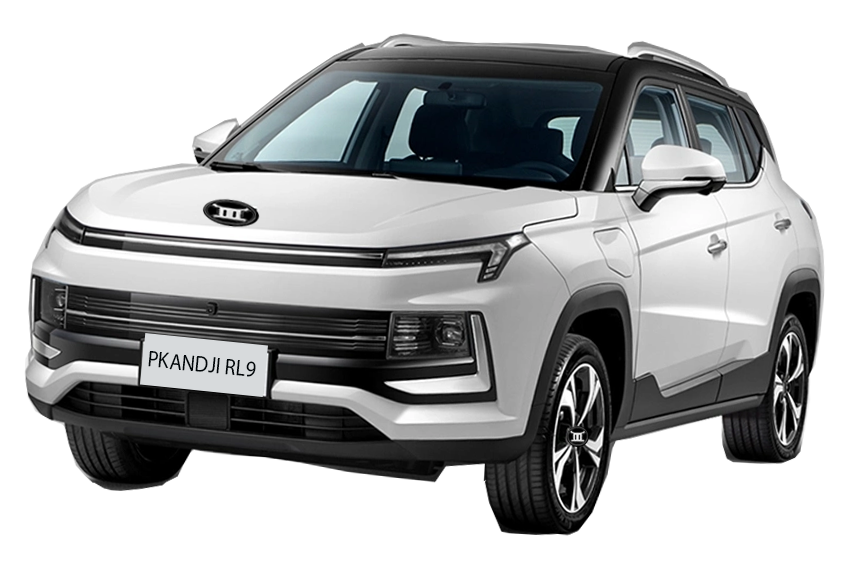
<style>
.page{position:relative;width:865px;height:565px;background:#ffffff}
.page>*{position:absolute;margin:0}
.t1{font:22.7px "MyriadPro-Regular";color:#000508;scale:0.9 1}
</style>
<div class="page">
<p class="t1" style="left:148px;top:351px;width:108px;height:26px;rotate:5deg">PKANDJI RL9</p>
</div>
